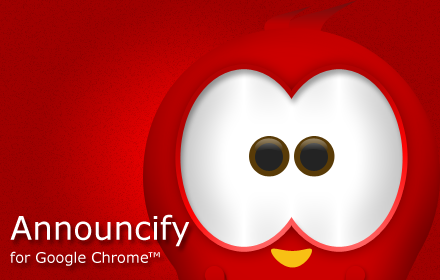
<style>
.page{position:relative;width:440px;height:280px}
.page>*{position:absolute;margin:0}
.t1{font:14.6px/23px "Verdana";color:#ffffff}
.t2{font:32.4px/23px "Verdana";color:#ffffff}
</style>
<div class="page">
<p class="t1" style="left:10px;top:214px;width:180px;height:52px"><span class="t2">Announcify<br></span>for Google Chrome™</p>
</div>
